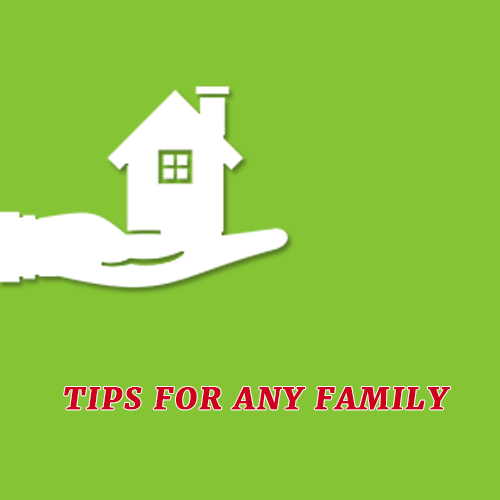
<style>
.page{position:relative;width:500px;height:500px;background:#85c435}
.page>*{position:absolute;margin:0}
.t1{font:30px "Merriweather-BlackItalic";letter-spacing:0.075em;color:#cd001d;text-transform:uppercase;font-weight:bold}
</style>
<div class="page">
<p class="t1" style="left:64px;top:387px;width:387px;height:23px">Tips for any family</p>
</div>
